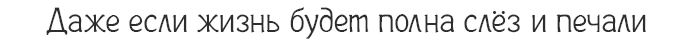
<style>
.page{position:relative;width:693px;height:46px;background:#ffffff}
.page>*{position:absolute;margin:0}
.t1{font:35px "Plainot";color:#2e2e2e}
</style>
<div class="page">
<p class="t1" style="left:46px;top:7px;width:600px;height:32px">Даже если жизнь будет полна слёз и печали</p>
</div>
